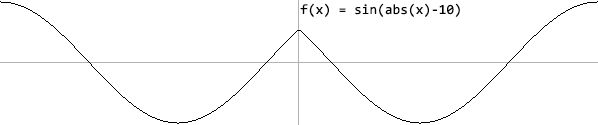
<style>
.page{position:relative;width:598px;height:125px;background:#ffffff}
.page>*{position:absolute;margin:0}
.t1{font:14px "Consolas";color:#000000}
</style>
<div class="page">
<p class="t1" style="left:300px;top:3px;width:160px;height:14px">f(x) = sin(abs(x)-10)</p>
</div>
